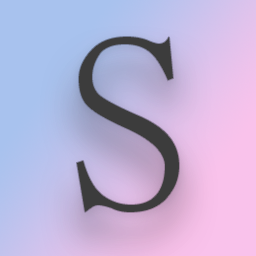
<style>
.page{position:relative;width:256px;height:256px}
.page>*{position:absolute;margin:0}
.t1{font:256px "SimSun";letter-spacing:0.03em;color:#3c3c3c;font-weight:bold}
</style>
<div class="page">
<p class="t1" style="left:76px;top:36px;width:104px;height:177px">S</p>
</div>
